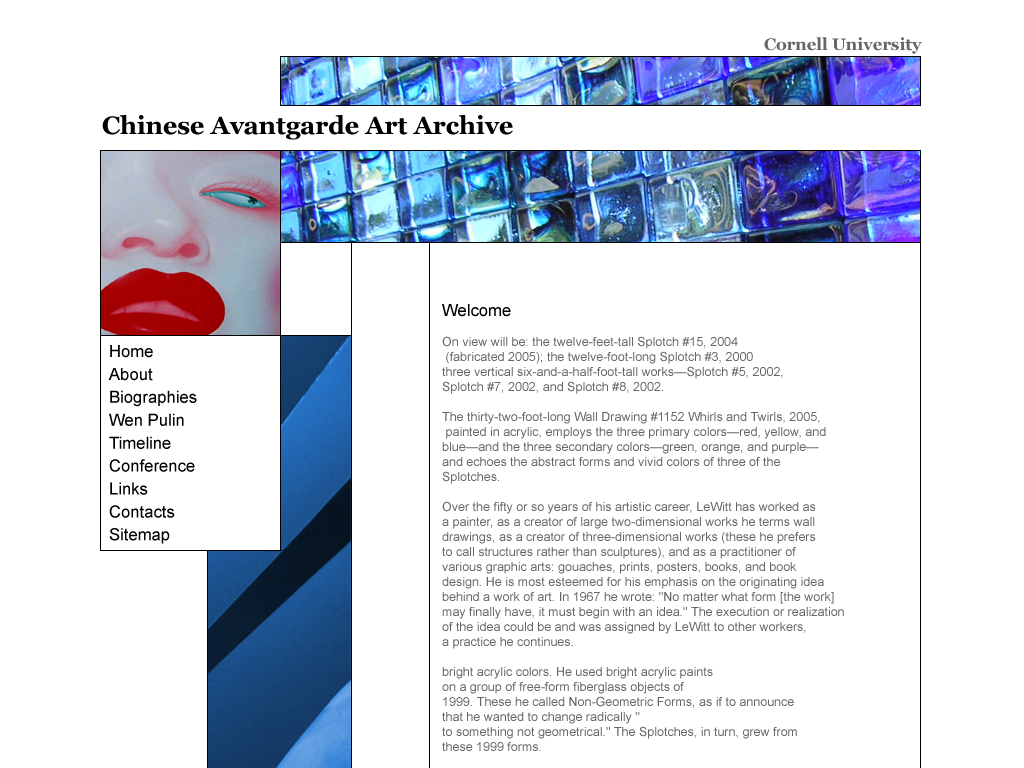
<style>
.page{position:relative;width:1024px;height:768px;background:#ffffff}
.page>*{position:absolute;margin:0}
.t1{font:16.7px "Georgia-Bold";color:#666666}
.t2{font:25px "Georgia-Bold";color:#000000}
.t3{font:12.5px "ArialMT";color:#666666}
.t4{font:16.7px "ArialMT";color:#000000}
.t5{font:16.7px/22.9px "ArialMT";color:#000000}
</style>
<div class="page">
<p class="t1" style="left:764px;top:37px;width:158px;height:17px">Cornell University</p>
<p class="t2" style="left:102px;top:115px;width:411px;height:25px">Chinese Avantgarde Art Archive</p>
<p class="t3" style="left:442px;top:304px;width:402px;height:447px"><span class="t4">Welcome<br></span><br>On view will be: the twelve-feet-tall Splotch #15, 2004<br> (fabricated 2005); the twelve-foot-long Splotch #3, 2000<br>three vertical six-and-a-half-foot-tall works—Splotch #5, 2002, <br>Splotch #7, 2002, and Splotch #8, 2002.<br><br>The thirty-two-foot-long Wall Drawing #1152 Whirls and Twirls, 2005,<br> painted in acrylic, employs the three primary colors—red, yellow, and <br>blue—and the three secondary colors—green, orange, and purple—<br>and echoes the abstract forms and vivid colors of three of the<br>Splotches.<br><br>Over the fifty or so years of his artistic career, LeWitt has worked as <br>a painter, as a creator of large two-dimensional works he terms wall <br>drawings, as a creator of three-dimensional works (these he prefers <br>to call structures rather than sculptures), and as a practitioner of <br>various graphic arts: gouaches, prints, posters, books, and book <br>design. He is most esteemed for his emphasis on the originating idea <br>behind a work of art. In 1967 he wrote: "No matter what form [the work] <br>may finally have, it must begin with an idea." The execution or realization <br>of the idea could be and was assigned by LeWitt to other workers, <br>a practice he continues.<br><br>bright acrylic colors. He used bright acrylic paints <br>on a group of free-form fiberglass objects of <br>1999. These he called Non-Geometric Forms, as if to announce <br>that he wanted to change radically "<br>to something not geometrical." The Splotches, in turn, grew from <br>these 1999 forms.</p>
<p class="t5" style="left:108px;top:345px;width:89px;height:199px">Home<br>About<br>Biographies<br>Wen Pulin<br>Timeline<br>Conference<br>Links<br>Contacts<br>Sitemap</p>
</div>
